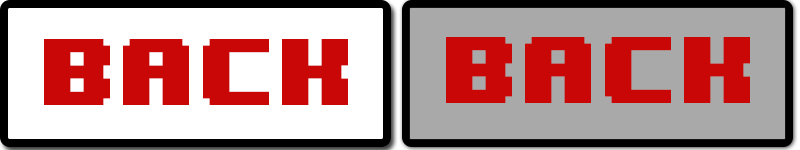
<style>
.page{position:relative;width:800px;height:150px;background:#ffffff}
.page>*{position:absolute;margin:0}
.t1{font:79.2px "8BITWONDERNominal";color:#c90707}
</style>
<div class="page">
<p class="t1" style="left:44px;top:39px;width:304px;height:66px">back</p>
<p class="t1" style="left:446px;top:37px;width:304px;height:66px">back</p>
</div>
